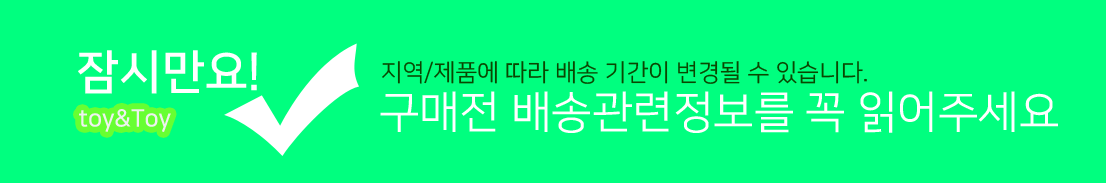
<style>
.page{position:relative;width:1106px;height:183px;background:#00ff7f}
.page>*{position:absolute;margin:0}
.t1{font:47px "NanumSquareB";color:#ffffff}
.t2{font:24px "NanumSquareR";color:#0a4600}
.t3{font:44.5px "NanumSquareR";color:#ffffff}
.t4{font:24px "NanumSquareB";color:#eff1f0}
</style>
<div class="page">
<p class="t1" style="left:78px;top:50px;width:179px;height:44px">잠시만요!</p>
<p class="t2" style="left:382px;top:61px;width:485px;height:23px">지역/제품에 따라 배송 기간이 변경될 수 있습니다.</p>
<p class="t3" style="left:380px;top:91px;width:678px;height:42px">구매전 배송관련정보를 꼭 읽어주세요</p>
<p class="t4" style="left:79px;top:109px;width:92px;height:23px">toy&amp;Toy</p>
</div>
